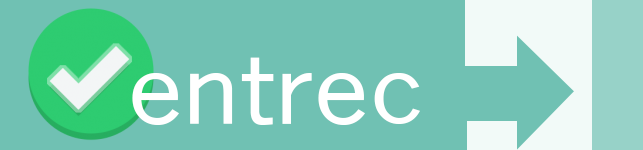
<style>
.page{position:relative;width:643px;height:150px;background:#70c1b3}
.page>*{position:absolute;margin:0}
.t1{font:99.1px "GothIWA-Hv-V3";color:#ffffff}
</style>
<div class="page">
<p class="t1" style="left:132px;top:57px;width:288px;height:68px">entrec</p>
</div>
